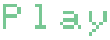
<style>
.page{position:relative;width:110px;height:40px;background:#ffffff}
.page>*{position:absolute;margin:0}
.t1{font:72px "BK0010";color:#78c794}
</style>
<div class="page">
<p class="t1" style="left:3px;top:4px;width:104px;height:32px">Play</p>
</div>
